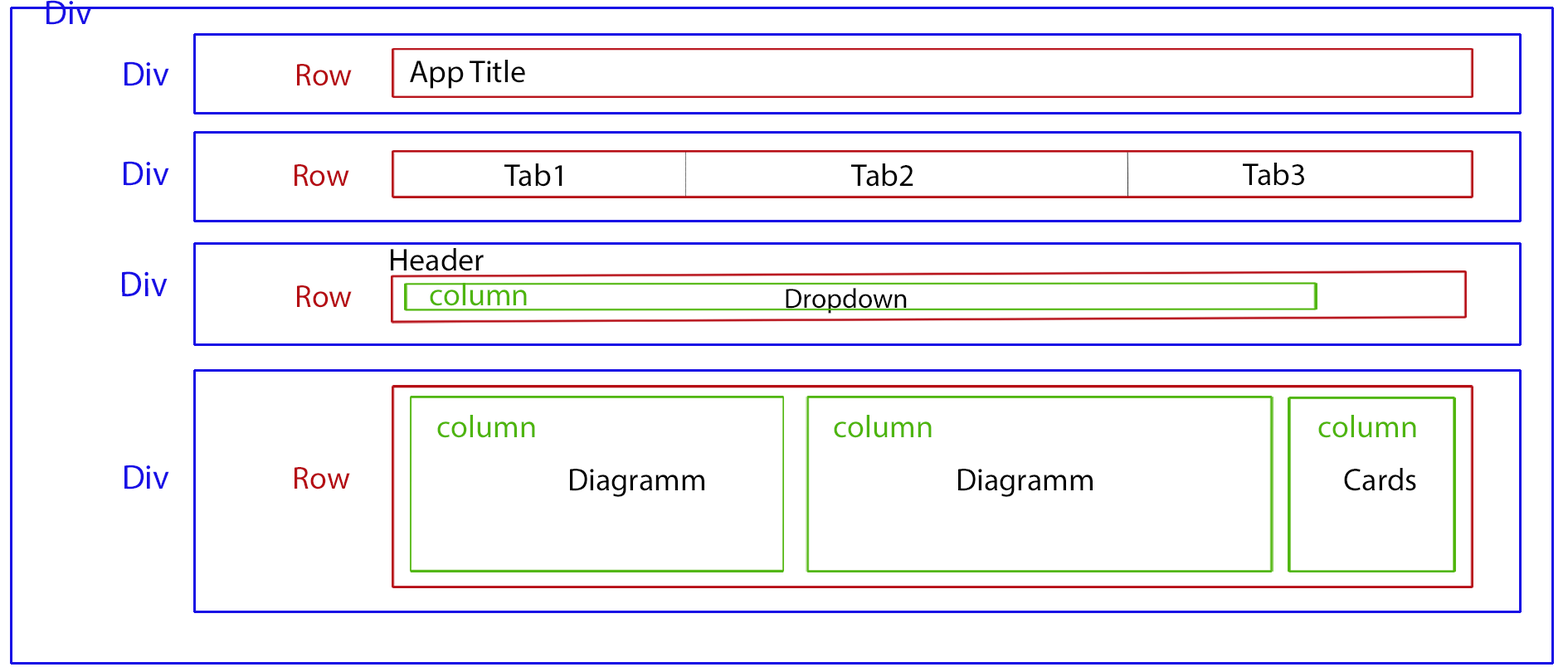
<style>
.page{position:relative;width:1568px;height:672px;background:#ffffff}
.page>*{position:absolute;margin:0}
.t1{font:34.6px "MyriadPro-Regular";color:#180ee5}
.t2{font:31.6px "MyriadPro-Regular";color:#b50a12}
.t3{font:31.6px "MyriadPro-Regular";color:#000000}
.t4{font:35.9px "MyriadPro-Regular";color:#180ee5;scale:0.96 1}
.t5{font:31.6px "MyriadPro-Regular";color:#4eb50a}
.t6{font:27.7px "MyriadPro-Regular";color:#000000}
</style>
<div class="page">
<p class="t1" style="left:46px;top:0px;width:46px;height:25px">Div</p>
<p class="t1" style="left:124px;top:61px;width:45px;height:25px">Div</p>
<p class="t2" style="left:297px;top:64px;width:55px;height:22px">Row</p>
<p class="t3" style="left:410px;top:60px;width:115px;height:29px">App Title</p>
<p class="t1" style="left:124px;top:161px;width:45px;height:25px">Div</p>
<p class="t2" style="left:295px;top:164px;width:54px;height:23px">Row</p>
<p class="t3" style="left:504px;top:163px;width:58px;height:24px">Tab1</p>
<p class="t3" style="left:851px;top:163px;width:62px;height:24px">Tab2</p>
<p class="t3" style="left:1243px;top:163px;width:61px;height:23px">Tab3</p>
<p class="t3" style="left:391px;top:248px;width:93px;height:23px">Header</p>
<p class="t4" style="left:122px;top:271px;width:46px;height:26px">Div</p>
<p class="t2" style="left:297px;top:285px;width:55px;height:23px">Row</p>
<p class="t5" style="left:430px;top:283px;width:97px;height:23px">column</p>
<p class="t6" style="left:786px;top:288px;width:121px;height:26px">Dropdown</p>
<p class="t5" style="left:437px;top:415px;width:98px;height:23px">column</p>
<p class="t5" style="left:834px;top:415px;width:98px;height:23px">column</p>
<p class="t5" style="left:1318px;top:415px;width:98px;height:23px">column</p>
<p class="t1" style="left:124px;top:465px;width:45px;height:24px">Div</p>
<p class="t2" style="left:295px;top:467px;width:55px;height:22px">Row</p>
<p class="t3" style="left:570px;top:469px;width:134px;height:28px">Diagramm</p>
<p class="t3" style="left:958px;top:469px;width:135px;height:28px">Diagramm</p>
<p class="t3" style="left:1344px;top:468px;width:72px;height:23px">Cards</p>
</div>
